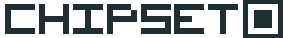
<style>
.page{position:relative;width:283px;height:38px;background:#ffffff}
.page>*{position:absolute;margin:0}
.t1{font:78px "VisitorTT2BRK";color:#1f2e33;text-transform:uppercase}
.t2{font:78px "VisitorTT2BRK";color:#ffffff;text-transform:uppercase}
</style>
<div class="page">
<p class="t1" style="left:5px;top:4px;width:233px;height:30px">CHIPSET</p>
<p class="t2" style="left:248px;top:4px;width:30px;height:30px">0</p>
</div>
